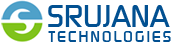
<style>
.page{position:relative;width:174px;height:43px;background:#ffffff}
.page>*{position:absolute;margin:0}
.t1{font:30.8px "PrisonerSF";color:#025091}
.t2{font:15.4px "PrisonerSF";letter-spacing:0.12em;color:#025091}
</style>
<div class="page">
<p class="t1" style="left:48px;top:5px;width:122px;height:22px">SRUJANA</p>
<p class="t2" style="left:48px;top:31px;width:123px;height:11px">TECHNOLOGIES</p>
</div>
